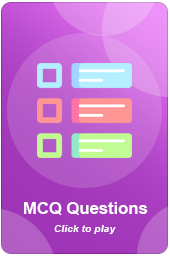
<style>
.page{position:relative;width:170px;height:256px}
.page>*{position:absolute;margin:0}
.t1{font:16.7px "Arial-BoldMT";color:#ffffff}
.t2{font:10.4px "Arial-BoldItalicMT";color:#ffffff}
</style>
<div class="page">
<p class="t1" style="left:24px;top:202px;width:124px;height:13px">MCQ Questions</p>
<p class="t2" style="left:54px;top:225px;width:62px;height:9px">Click to play</p>
</div>
